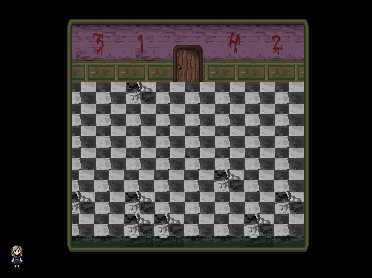
<style>
.page{position:relative;width:372px;height:278px;background:#000000}
.page>*{position:absolute;margin:0}
.t1{font:24.2px "OctoberCrow";color:#5e1313}
.t2{font:18.5px "OctoberCrow";color:#5e1313}
.t3{font:23.2px "OctoberCrow";color:#5e1313}
.t4{font:20.3px "OctoberCrow";color:#5e1313}
</style>
<div class="page">
<p class="t1" style="left:92px;top:33px;width:12px;height:19px;rotate:8deg">3</p>
<p class="t2" style="left:137px;top:34px;width:7px;height:19px;rotate:-4deg">1</p>
<p class="t3" style="left:228px;top:32px;width:13px;height:22px;rotate:11deg">4</p>
<p class="t4" style="left:271px;top:35px;width:12px;height:16px;rotate:-7deg">2</p>
</div>
